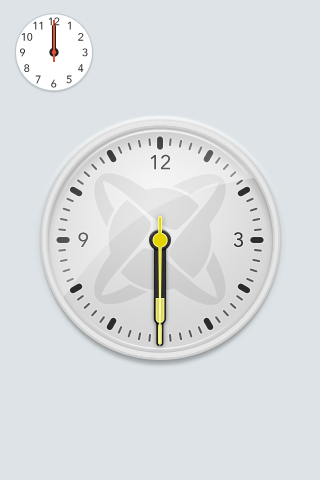
<style>
.page{position:relative;width:320px;height:480px;background:#dde3e6}
.page>*{position:absolute;margin:0}
.t1{font:11px "Avenir-Roman"}
.t2{font:11px "Avenir-Roman";color:#333333}
.t3{font:20px "Avenir-Roman";color:#535353}
.t4{font:20px "Avenir-Roman";color:#5b5b5b}
.t5{font:20px "Avenir-Roman";color:#2f2f2f}
</style>
<div class="page">
<p class="t1" style="left:48px;top:17px;width:12px;height:9px">12</p>
<p class="t2" style="left:33px;top:21px;width:10px;height:9px">11</p>
<p class="t1" style="left:67px;top:21px;width:4px;height:9px">1</p>
<p class="t1" style="left:21px;top:33px;width:12px;height:8px">10</p>
<p class="t1" style="left:78px;top:33px;width:6px;height:8px">2</p>
<p class="t2" style="left:20px;top:48px;width:5px;height:9px">9</p>
<p class="t1" style="left:82px;top:48px;width:6px;height:9px">3</p>
<p class="t1" style="left:24px;top:64px;width:6px;height:8px">8</p>
<p class="t1" style="left:78px;top:64px;width:6px;height:8px">4</p>
<p class="t1" style="left:35px;top:75px;width:6px;height:9px">7</p>
<p class="t1" style="left:66px;top:75px;width:6px;height:9px">5</p>
<p class="t1" style="left:51px;top:79px;width:6px;height:9px">6</p>
<p class="t3" style="left:150px;top:154px;width:20px;height:16px">12</p>
<p class="t4" style="left:78px;top:232px;width:10px;height:15px">9</p>
<p class="t5" style="left:233px;top:232px;width:10px;height:15px">3</p>
</div>
